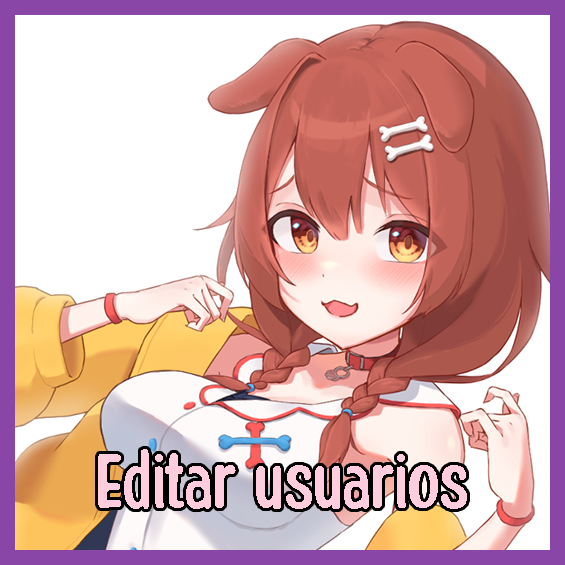
<style>
.page{position:relative;width:565px;height:565px;background:#ffffff}
.page>*{position:absolute;margin:0}
.t1{font:85.1px "HoneyNotes-Regular";color:#ffcddd}
</style>
<div class="page">
<p class="t1" style="left:98px;top:449px;width:369px;height:60px">Editar usuarios</p>
</div>
